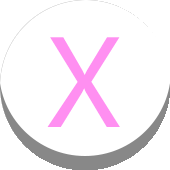
<style>
.page{position:relative;width:170px;height:170px;background:#ffffff}
.page>*{position:absolute;margin:0}
.t1{font:128px "SegoeUIHistoric";color:#ff8ff1}
</style>
<div class="page">
<p class="t1" style="left:47px;top:37px;width:73px;height:90px">X</p>
</div>
